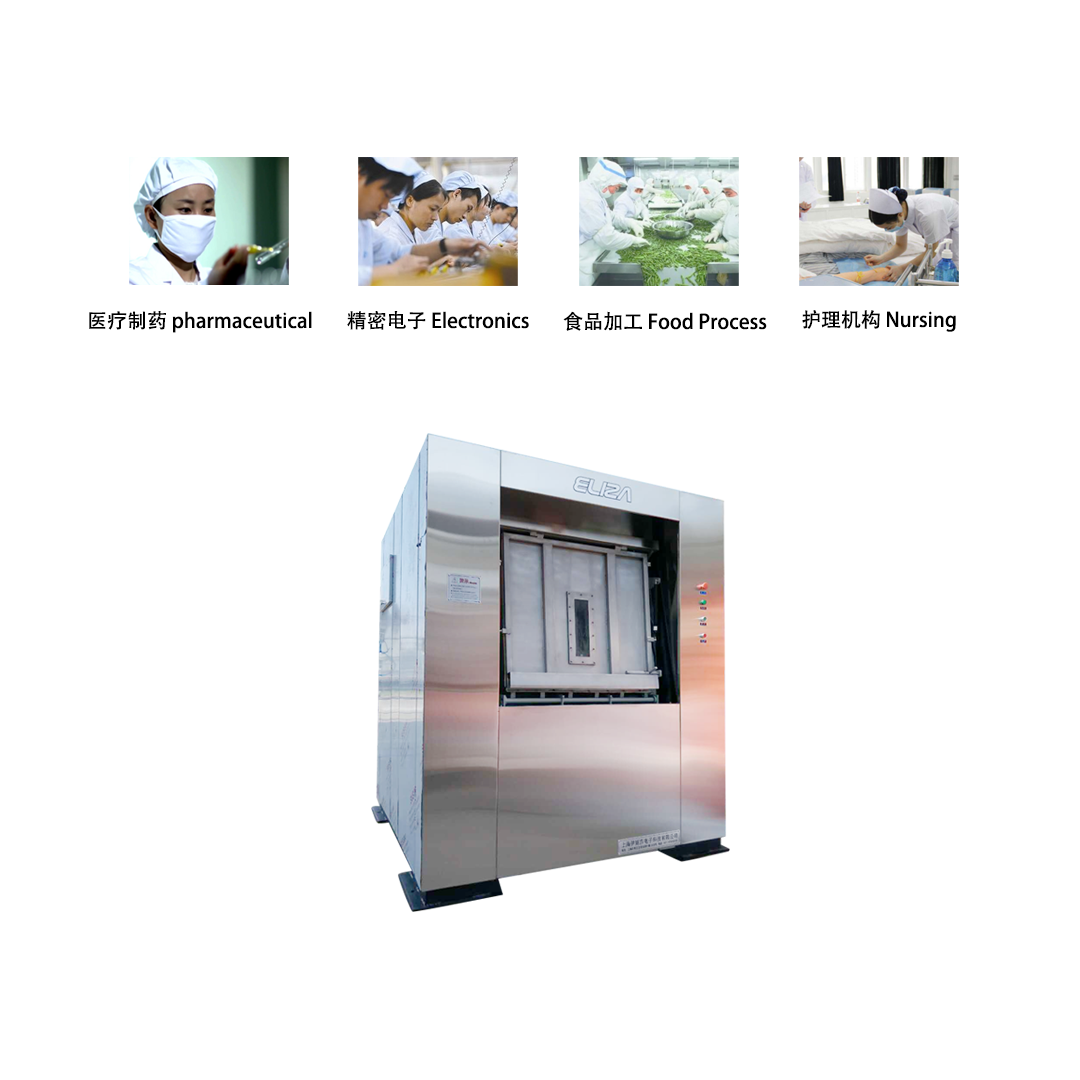
<style>
.page{position:relative;width:1080px;height:1080px;background:#ffffff}
.page>*{position:absolute;margin:0}
.t1{font:20px "AdobeHeitiStd-Regular";color:#000000}
</style>
<div class="page">
<p class="t1" style="left:89px;top:311px;width:223px;height:22px">医疗制药 pharmaceutical</p>
<p class="t1" style="left:347px;top:311px;width:182px;height:19px">精密电子 Electronics</p>
<p class="t1" style="left:563px;top:311px;width:204px;height:20px">食品加工 Food Process</p>
<p class="t1" style="left:802px;top:310px;width:154px;height:22px">护理机构 Nursing</p>
</div>
